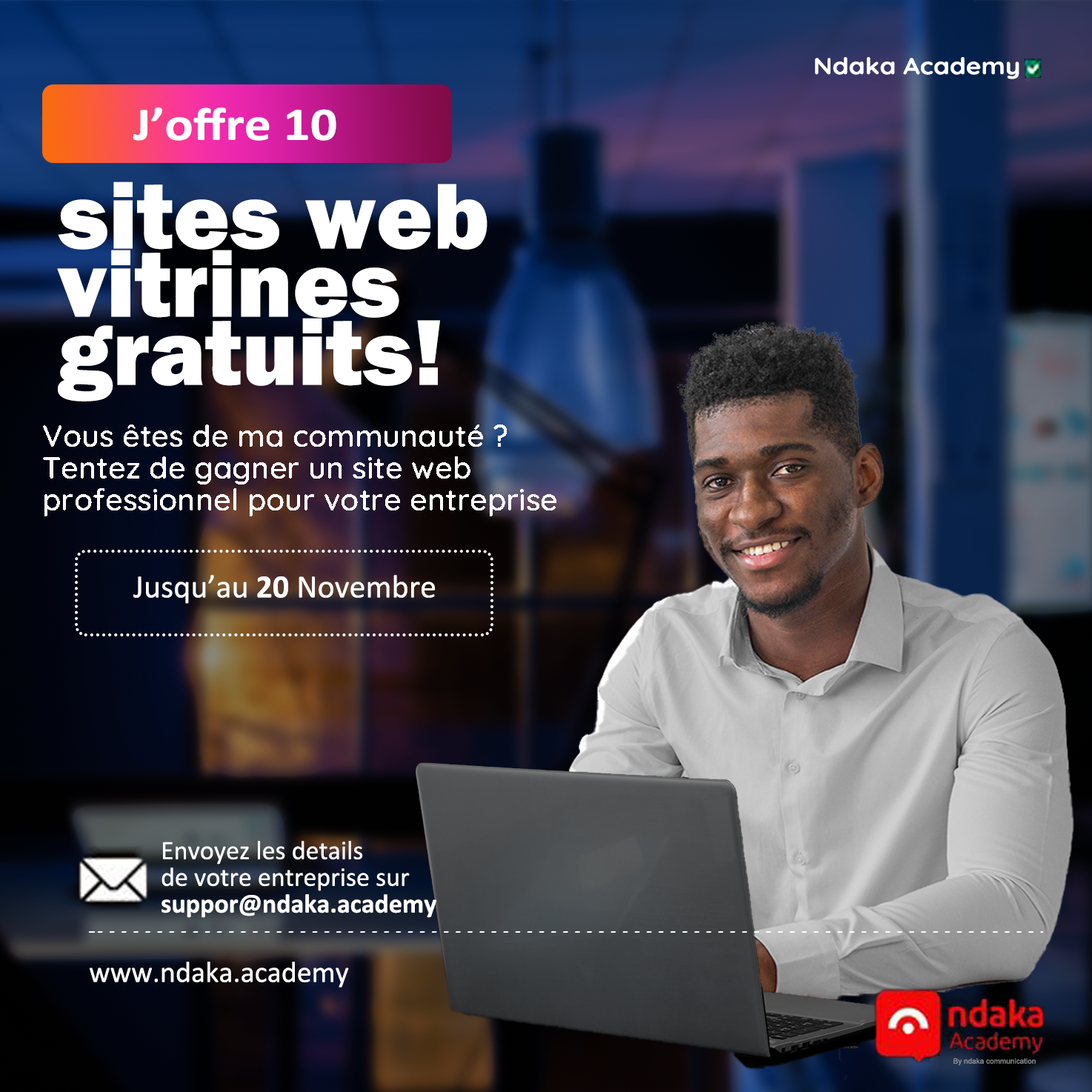
<style>
.page{position:relative;width:1092px;height:1092px}
.page>*{position:absolute;margin:0}
.t1{font:23.1px "Quicksand-Bold";color:#ffffff;scale:1.12 1}
.t2{font:47px "Calibri-Bold";color:#ffffff;scale:1.13 1}
.t3{font:96.3px/68.2px "FranklinGothic-Heavy";color:#ffffff}
.t4{font:30.4px/31.9px "Quicksand-SemiBold";color:#ffffff}
.t5{font:32.6px "Calibri";color:#ffffff}
.t6{font:32.6px "Calibri-Bold";color:#ffffff}
.t7{font:26.7px/26.7px "Calibri";color:#ffffff}
.t8{font:26.7px/26.7px "Calibri-Bold";color:#ffffff}
.t9{font:29.6px "Calibri";color:#ffffff}
.t10{font:7.4px "ArialMT";color:#868687}
</style>
<div class="page">
<p class="t1" style="left:815px;top:57px;width:204px;height:22px">Ndaka Academy</p>
<p class="t2" style="left:133px;top:107px;width:203px;height:34px">J’offre 10</p>
<p class="t3" style="left:57px;top:182px;width:430px;height:220px">sites web vitrines gratuits!</p>
<p class="t4" style="left:43px;top:424px;width:513px;height:92px">Vous êtes de ma communauté ? Tentez de gagner un site web professionnel pour votre entreprise</p>
<p class="t5" style="left:133px;top:575px;width:302px;height:29px">Jusqu’au <span class="t6">20</span> Novembre</p>
<p class="t7" style="left:162px;top:841px;width:274px;height:77px">Envoyez les details            de votre entreprise sur <span class="t8">suppor@ndaka.academy</span></p>
<p class="t9" style="left:90px;top:962px;width:259px;height:26px">www.ndaka.academy</p>
<p class="t10" style="left:953px;top:1058px;width:83px;height:7px">By ndaka communication</p>
</div>
